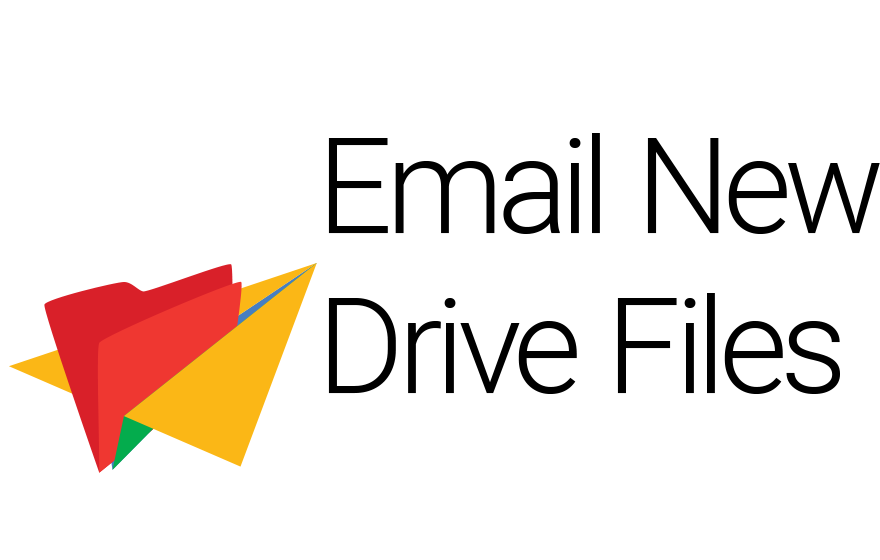
<style>
.page{position:relative;width:880px;height:560px;background:#ffffff}
.page>*{position:absolute;margin:0}
.t1{font:133.3px "Roboto-Light";letter-spacing:-0.029em;color:#000000}
</style>
<div class="page">
<p class="t1" style="left:328px;top:133px;width:552px;height:261px">Email New<br>Drive Files</p>
</div>
